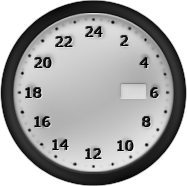
<style>
.page{position:relative;width:187px;height:186px;background:#ffffff}
.page>*{position:absolute;margin:0}
.t1{font:14px "Verdana";color:#000000}
</style>
<div class="page">
<p class="t1" style="left:86px;top:27px;width:17px;height:10px">24</p>
<p class="t1" style="left:56px;top:37px;width:17px;height:10px">22</p>
<p class="t1" style="left:121px;top:36px;width:8px;height:10px">2</p>
<p class="t1" style="left:35px;top:58px;width:17px;height:10px">20</p>
<p class="t1" style="left:140px;top:58px;width:9px;height:10px">4</p>
<p class="t1" style="left:26px;top:88px;width:16px;height:10px">18</p>
<p class="t1" style="left:151px;top:88px;width:8px;height:10px">6</p>
<p class="t1" style="left:35px;top:117px;width:16px;height:10px">16</p>
<p class="t1" style="left:143px;top:117px;width:8px;height:10px">8</p>
<p class="t1" style="left:53px;top:140px;width:16px;height:10px">14</p>
<p class="t1" style="left:86px;top:149px;width:16px;height:10px">12</p>
<p class="t1" style="left:118px;top:141px;width:16px;height:10px">10</p>
</div>
